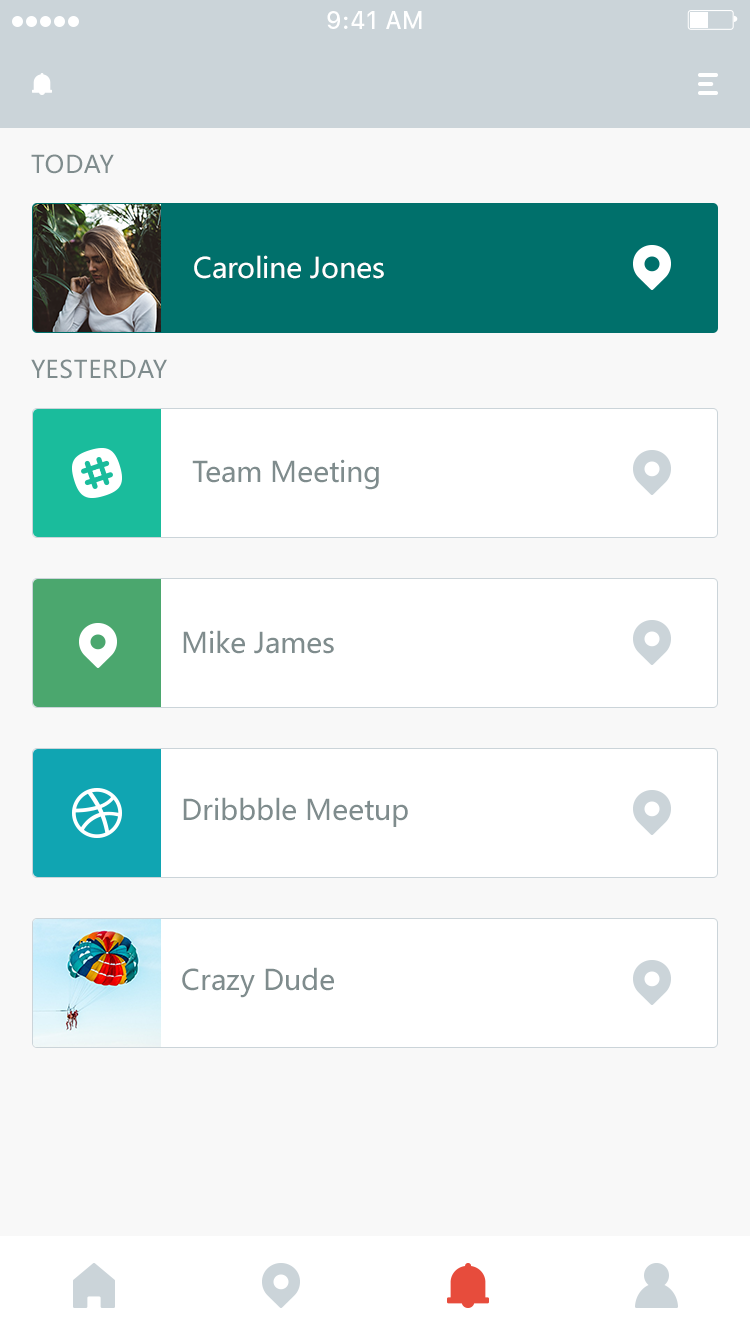
<style>
.page{position:relative;width:750px;height:1334px;background:#f8f8f8}
.page>*{position:absolute;margin:0}
.t1{font:24px "MicrosoftYaHei";letter-spacing:0.025em;color:#7f8c8d;text-transform:uppercase}
.t2{font:28px "MicrosoftYaHei";color:#ffffff}
.t3{font:28px "MicrosoftYaHei";color:#7f8c8d}
</style>
<div class="page">
<p class="t1" style="left:31px;top:154px;width:83px;height:20px">Today</p>
<p class="t2" style="left:194px;top:255px;width:190px;height:24px">Caroline Jones</p>
<p class="t1" style="left:31px;top:359px;width:136px;height:20px">yesterday</p>
<p class="t3" style="left:192px;top:459px;width:187px;height:31px">Team Meeting</p>
<p class="t3" style="left:183px;top:630px;width:151px;height:24px">Mike James</p>
<p class="t3" style="left:183px;top:797px;width:225px;height:30px">Dribbble Meetup</p>
<p class="t3" style="left:182px;top:967px;width:152px;height:31px">Crazy Dude</p>
</div>
